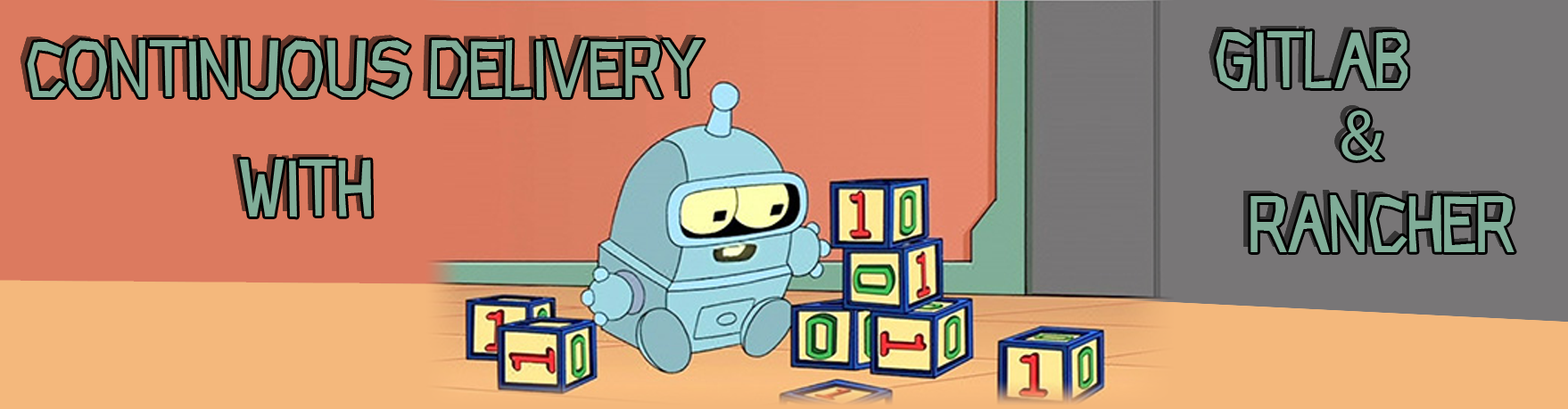
<style>
.page{position:relative;width:1568px;height:409px}
.page>*{position:absolute;margin:0}
.t1{font:71.4px "CFRockAge-Regular";color:#80ad98}
.t2{font:71.4px "MyriadPro-Regular";color:#80ad98}
</style>
<div class="page">
<p class="t1" style="left:27px;top:40px;width:677px;height:58px">continuous Delivery</p>
<p class="t1" style="left:1216px;top:31px;width:192px;height:58px">Gitlab</p>
<p class="t2" style="left:1341px;top:111px;width:42px;height:50px">&amp;</p>
<p class="t1" style="left:239px;top:160px;width:133px;height:58px">with</p>
<p class="t1" style="left:1250px;top:195px;width:264px;height:57px">Rancher</p>
</div>
